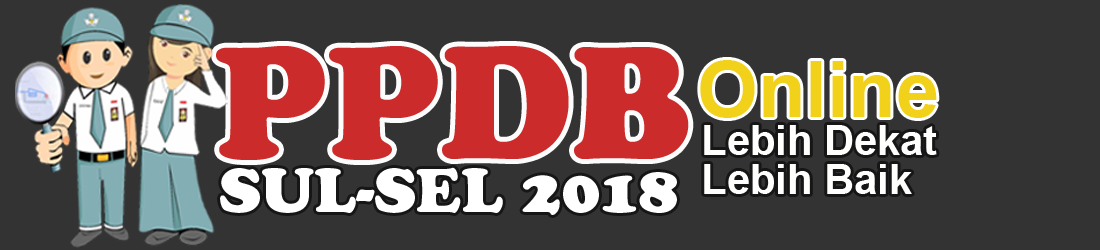
<style>
.page{position:relative;width:1100px;height:250px;background:#333333}
.page>*{position:absolute;margin:0}
.t1{font:165px "CooperBlack";color:#cc2b2b}
.t2{font:77.5px "Arial-BoldMT";color:#f2d11a}
.t3{font:41.6px/38.6px "Arial-BoldMT";color:#fffffe}
.t4{font:62px "CooperBlackStd";color:#ffffff}
</style>
<div class="page">
<p class="t1" style="left:216px;top:46px;width:473px;height:114px">PPDB</p>
<p class="t2" style="left:700px;top:60px;width:237px;height:58px">Online</p>
<p class="t3" style="left:704px;top:125px;width:233px;height:69px">Lebih Dekat<br>Lebih Baik</p>
<p class="t4" style="left:220px;top:167px;width:457px;height:48px">SUL-SEL 2018</p>
</div>
